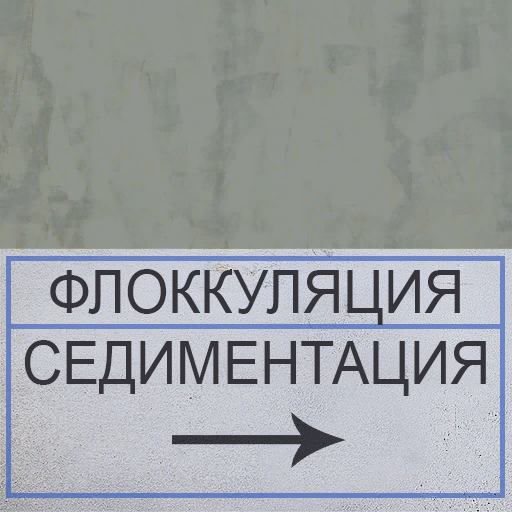
<style>
.page{position:relative;width:512px;height:512px}
.page>*{position:absolute;margin:0}
.t1{font:60px/71px "ArialMT";letter-spacing:-0.01em;color:#35343b;scale:0.94 1}
</style>
<div class="page">
<p class="t1" style="left:24px;top:269px;width:462px;height:127px;text-align:center">ФЛОККУЛЯЦИЯ<br>СЕДИМЕНТАЦИЯ</p>
</div>
